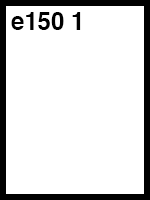
<style>
.page{position:relative;width:150px;height:200px;background:#ffffff}
.page>*{position:absolute;margin:0}
.t1{font:24px "Helvetica-Bold";color:#000000}
</style>
<div class="page">
<p class="t1" style="left:11px;top:12px;width:70px;height:18px">e150 1</p>
</div>
